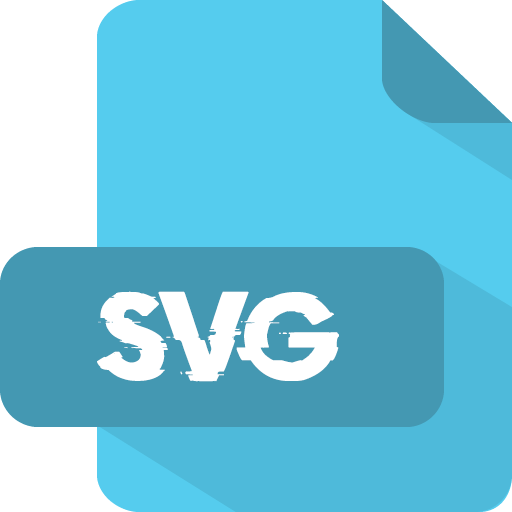
<style>
.page{position:relative;width:512px;height:512px;background:#55ccee}
.page>*{position:absolute;margin:0}
.t1{font:100px "DoctorGlitch";letter-spacing:0.05em;color:#ffffff}
</style>
<div class="page">
<p class="t1" style="left:97px;top:291px;width:242px;height:91px">SVG</p>
</div>
